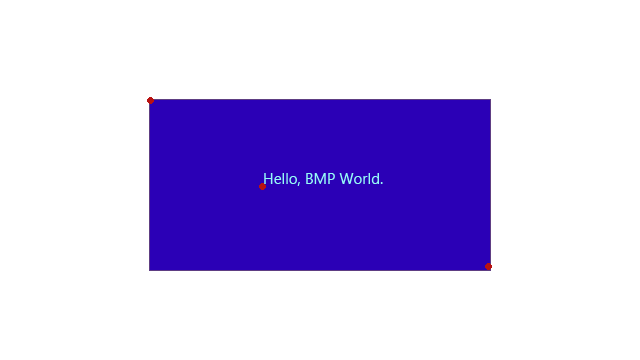
<style>
.page{position:relative;width:640px;height:360px;background:#ffffff}
.page>*{position:absolute;margin:0}
.t1{font:15px "SegoeUI";color:#96f9f6}
</style>
<div class="page">
<p class="t1" style="left:264px;top:173px;width:119px;height:13px">Hello, BMP World.</p>
</div>
